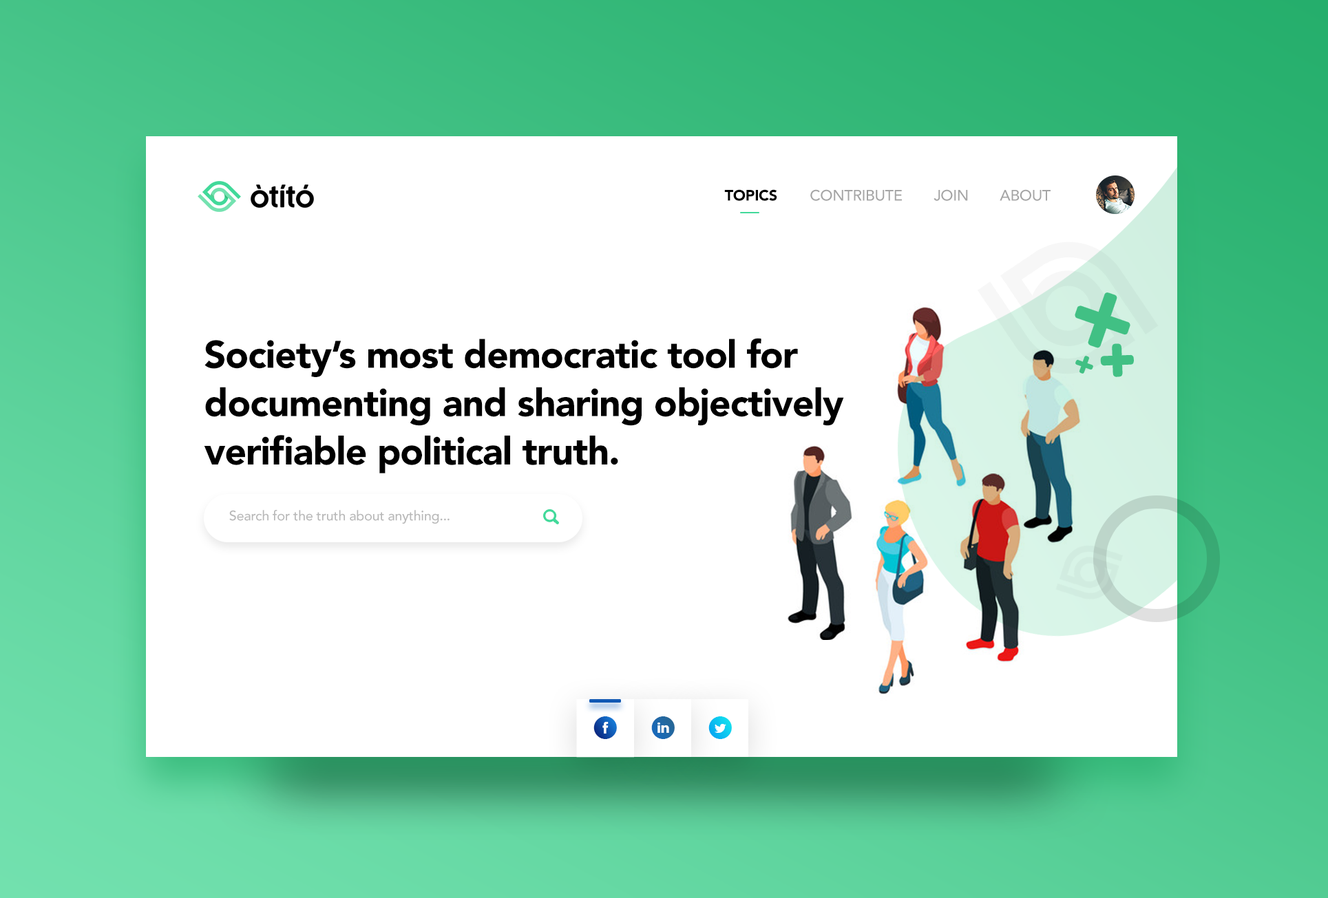
<style>
.page{position:relative;width:1328px;height:898px;background:#ffffff}
.page>*{position:absolute;margin:0}
.t1{font:15.1px "AvenirLTStd-Medium";letter-spacing:-0.02em;color:#a5a5a5}
.t2{font:15.1px "AvenirLTStd-Black";letter-spacing:-0.02em;color:#000000}
.t3{font:93.8px "AvenirLTStd-Medium";letter-spacing:-0.02em;color:#41c084}
.t4{font:38.2px/48.4px "AvenirLTStd-Black";letter-spacing:-0.02em;color:#000000}
.t5{font:51.7px "AvenirLTStd-Medium";letter-spacing:-0.02em;color:#41c084}
.t6{font:28.5px "AvenirLTStd-Medium";letter-spacing:-0.02em;color:#41c084}
.t7{font:13.8px "AvenirLTStd-Medium";letter-spacing:-0.02em;color:#b8b8b8}
.t8{font:35.4px "socialtype"}
.t9{font:35.3px "socialtype";color:#2068a8}
.t10{font:35.3px "socialtype";color:#0cc4f0}
</style>
<div class="page">
<p class="t1" style="left:724px;top:189px;width:326px;height:12px"><span class="t2">TOPICS     </span>   CONTRIBUTE        JOIN        ABOUT</p>
<p class="t3" style="left:1077px;top:295px;width:50px;height:51px;rotate:19deg">+</p>
<p class="t4" style="left:204px;top:338px;width:640px;height:136px;text-align:right">Society’s most democratic tool for<br>documenting and sharing objectively<br>verifiable political truth.</p>
<p class="t5" style="left:1103px;top:346px;width:28px;height:28px;rotate:-2deg">+</p>
<p class="t6" style="left:1076px;top:357px;width:16px;height:15px;rotate:20deg">+</p>
<p class="t7" style="left:229px;top:510px;width:220px;height:14px">Search for the truth about anything...</p>
<p class="t8" style="left:593px;top:716px;width:24px;height:23px">B</p>
<p class="t9" style="left:651px;top:716px;width:23px;height:23px">D</p>
<p class="t10" style="left:708px;top:716px;width:24px;height:23px">A</p>
</div>
